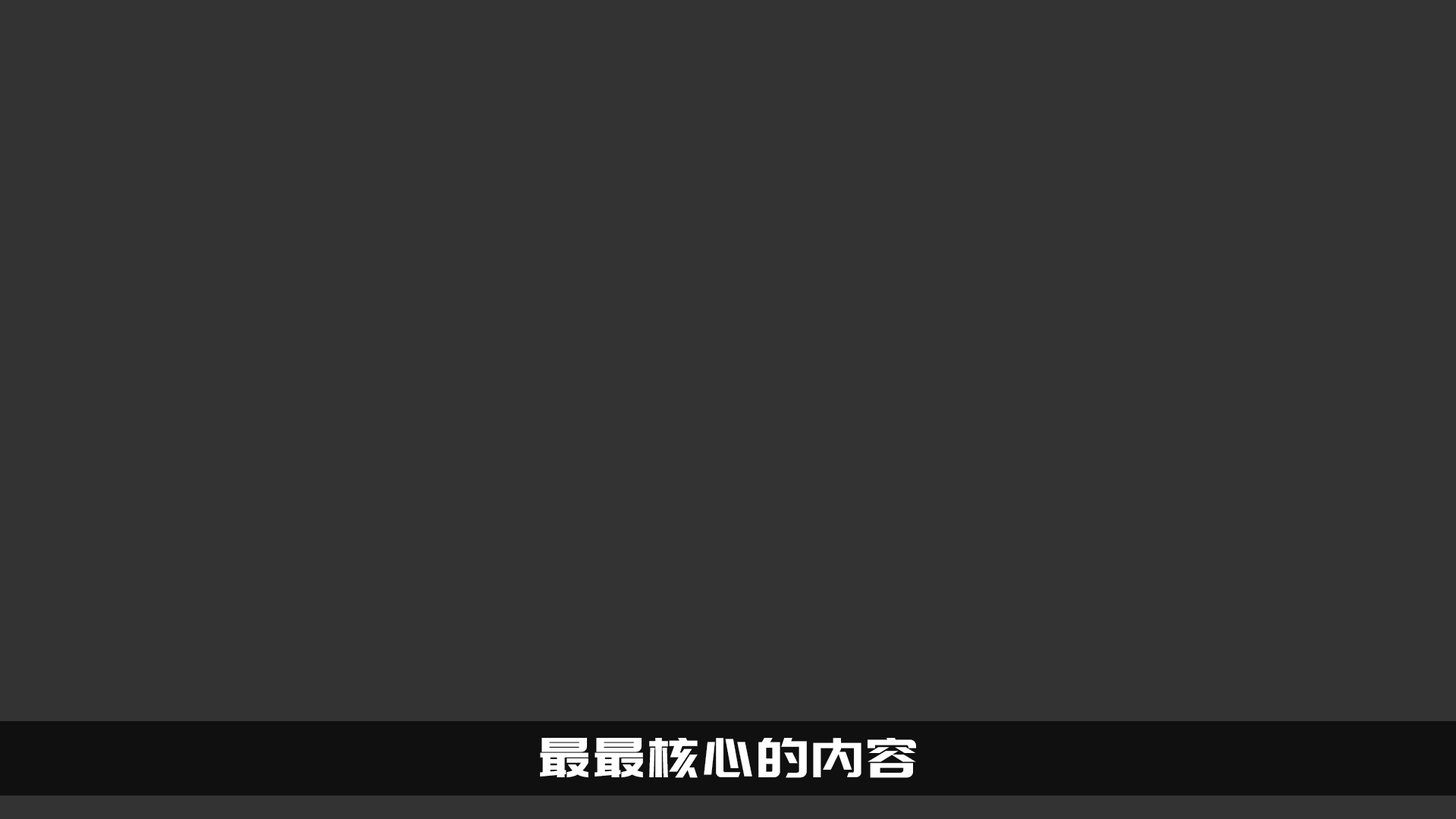
<style>
.page{position:relative;width:1456px;height:819px;background:#333333}
.page>*{position:absolute;margin:0}
.t1{font:54.6px "PangMenZhengDao-3";color:#ffffff}
</style>
<div class="page">
<p class="t1" style="left:540px;top:738px;width:376px;height:40px">最最核心的内容</p>
</div>
